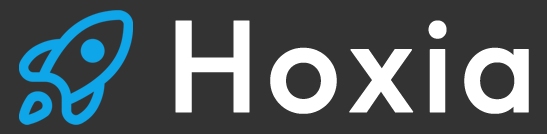
<style>
.page{position:relative;width:547px;height:134px;background:#333333}
.page>*{position:absolute;margin:0}
.t1{font:130px "Outfit-Medium";letter-spacing:0.035em;color:#ffffff;font-weight:bold}
</style>
<div class="page">
<p class="t1" style="left:175px;top:20px;width:354px;height:94px">Hoxia</p>
</div>
